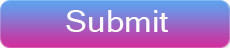
<style>
.page{position:relative;width:230px;height:48px}
.page>*{position:absolute;margin:0}
.t1{font:30px "MicrosoftSansSerif";letter-spacing:0.005em;color:#fffbfb;scale:1.1 1}
</style>
<div class="page">
<p class="t1" style="left:66px;top:10px;width:102px;height:22px">Submit</p>
</div>
